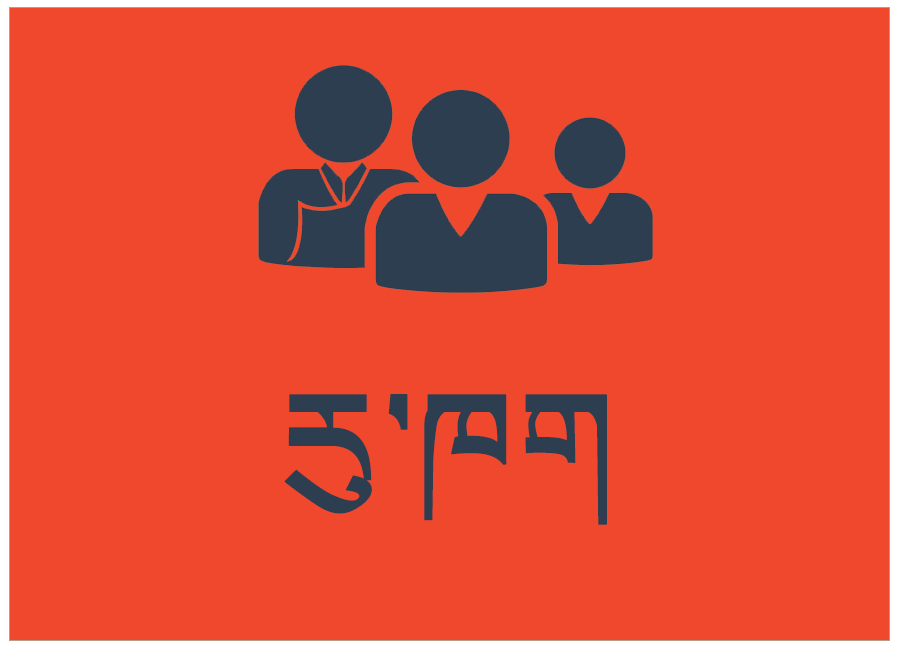
<style>
.page{position:relative;width:900px;height:650px;background:#ef482c}
.page>*{position:absolute;margin:0}
.t1{font:160px "MonlamUniOuChan5";color:#2c3e50;font-weight:bold}
</style>
<div class="page">
<p class="t1" style="left:284px;top:394px;width:323px;height:131px">རུ་ཁག</p>
</div>
